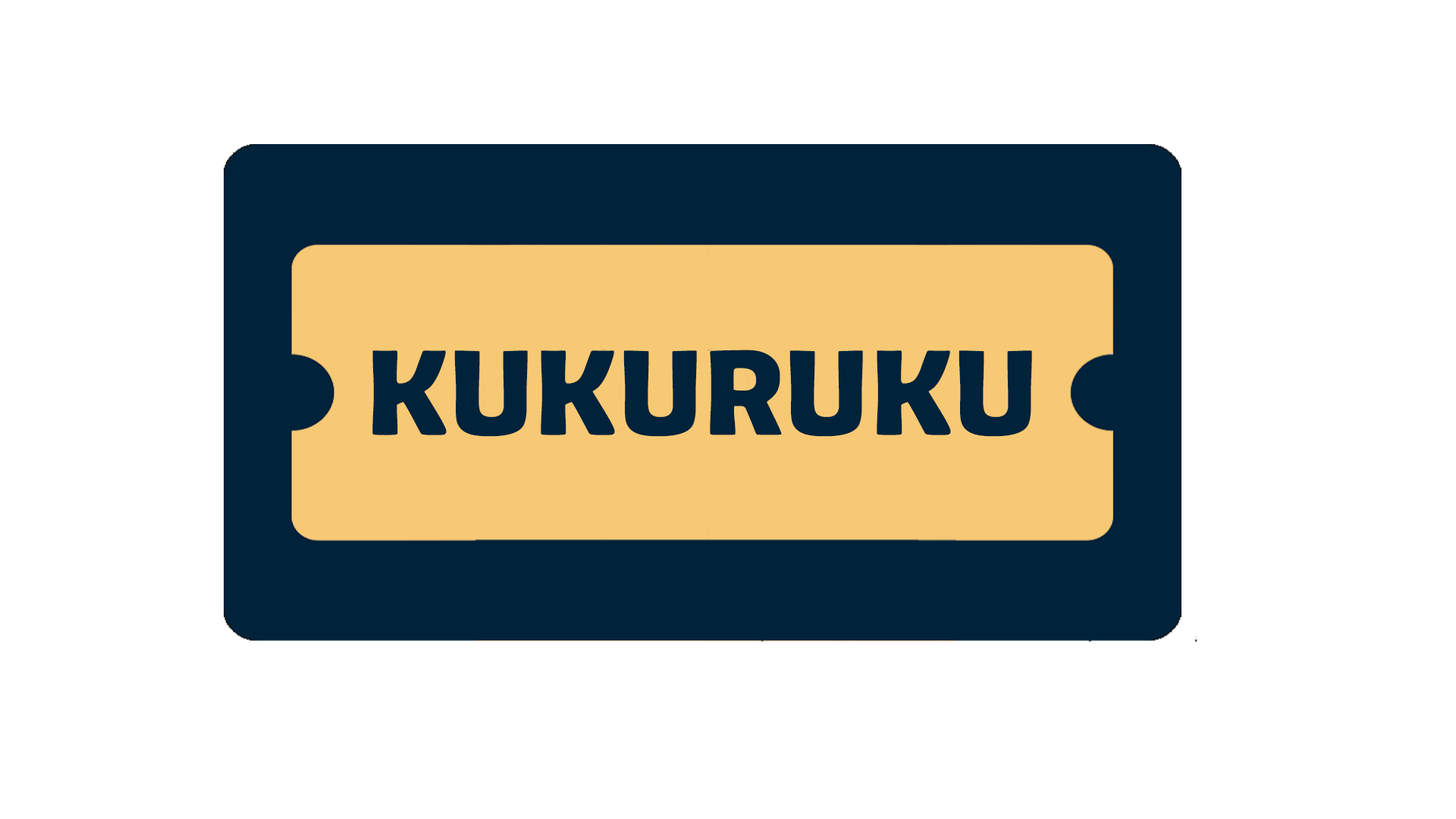
<style>
.page{position:relative;width:1456px;height:819px;background:#ffffff}
.page>*{position:absolute;margin:0}
.t1{font:122.7px "BerlinSansFBDemi-Bold";letter-spacing:0.02em;color:#00223a}
</style>
<div class="page">
<p class="t1" style="left:372px;top:350px;width:660px;height:87px">KUKURUKU</p>
</div>
